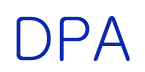
<style>
.page{position:relative;width:145px;height:72px;background:#ffffff}
.page>*{position:absolute;margin:0}
.t1{font:60px "Gulim";color:#0928b0}
</style>
<div class="page">
<p class="t1" style="left:16px;top:15px;width:114px;height:47px">DPA</p>
</div>
